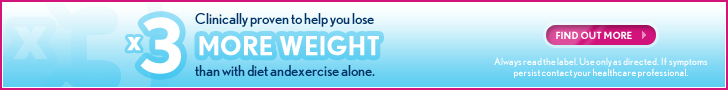
<style>
.page{position:relative;width:728px;height:90px}
.page>*{position:absolute;margin:0}
.t1{font:75px "NobelBold";color:#ffffff}
.t2{font:15px "NobelRegular";color:#003366}
.t3{font:30px "NobelBold";color:#ffffff}
.t4{font:26px "NobelBold";color:#ffffff}
.t5{font:10px "NobelBold";color:#ffffff}
.t6{font:10px/11px "NobelRegular";color:#ffffff}
</style>
<div class="page">
<p class="t1" style="left:140px;top:17px;width:41px;height:57px">3</p>
<p class="t2" style="left:195px;top:13px;width:179px;height:14px">Clinically proven to help you lose</p>
<p class="t3" style="left:127px;top:37px;width:14px;height:14px">x</p>
<p class="t4" style="left:199px;top:35px;width:180px;height:21px">MORE WEIGHT</p>
<p class="t5" style="left:556px;top:31px;width:76px;height:8px">FIND OUT MORE</p>
<p class="t2" style="left:195px;top:65px;width:180px;height:11px">than with diet andexercise alone.</p>
<p class="t6" style="left:494px;top:57px;width:214px;height:21px;text-align:center">Always read the label. Use only as directed.  If  symptoms persist contact your healthcare professional.</p>
</div>
